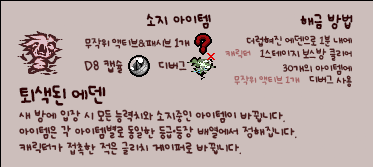
<style>
.page{position:relative;width:373px;height:167px;background:#ccbebb}
.page>*{position:absolute;margin:0}
.t1{font:12px "UhBeeSe_hyunBold";color:#2e0304}
.t2{font:12px "UhBeeSe_hyunBold";letter-spacing:-0.1em;color:#2e0304}
.t3{font:12px "UhBeeSe_hyunBold";letter-spacing:-0.15em;color:#2e0304}
.t4{font:9px "UhBeeSe_hyunBold";letter-spacing:-0.075em;color:#4b1c1c}
.t5{font:9px "UhBeeSe_hyunBold";color:#4b1c1c}
.t6{font:9px "Font_soulsV2_Title-Regular";letter-spacing:-0.075em;color:#4b1c1c}
.t7{font:10px "Font_soulsV2_Title-Regular";letter-spacing:-0.075em;color:#4b1c1c}
.t8{font:9px/13px "UhBeeSe_hyunBold";letter-spacing:-0.05em;color:#4b1c1c}
.t9{font:8px/13px "UhBeeSe_hyunBold";letter-spacing:-0.05em;color:#a66565}
.t10{font:8px/13px "UhBeeSe_hyunBold";color:#a66565}
.t11{font:9px/15px "UhBeeSe_hyunBold";letter-spacing:-0.05em;color:#4b1c1c}
.t12{font:9px/11px "UhBeeSe_hyunBold";letter-spacing:-0.05em;color:#4b1c1c}
.t13{font:8px/13px "UhBeeSe_hyunBold";letter-spacing:0.025em;color:#a66565}
.t14{font:10px "UhBeeSe_hyunBold";color:#4b1c1c}
.t15{font:10px/16px "UhBeeSe_hyunBold";letter-spacing:-0.025em;color:#4b1c1c}
.t16{font:15.2px/24px "UhBeeSe_hyunBold";letter-spacing:-0.1em;color:#2e0304;scale:1.05 1}
.t17{font:16px/24px "UhBeeSe_hyunBold";letter-spacing:-0.05em;color:#2e0304}
.t18{font:16px/24px "UhBeeSe_hyunBold";letter-spacing:-0.025em;color:#2e0304}
.t19{font:10px/16px "UhBeeSe_hyun";letter-spacing:-0.025em;color:#4b1c1c}
</style>
<div class="page">
<p class="t1" style="left:146px;top:13px;width:65px;height:16px"><span class="t2">소</span>지 아이템</p>
<p class="t1" style="left:300px;top:13px;width:53px;height:17px">해금 방<span class="t3">법</span></p>
<p class="t4" style="left:85px;top:38px;width:105px;height:11px">무작위 <span class="t5">액</span>티브<span class="t6">&amp;</span><span class="t5">패</span>시브 <span class="t7">1</span>개</p>
<p class="t8" style="left:225px;top:35px;width:127px;height:53px;text-align:right">더럽혀진 에덴으로 1분 내에<br> <span class="t9">캐</span><span class="t10">릭</span><span class="t9">터   </span><span class="t11">1스테이지 보스방 클리어<br></span><span class="t12">30개의 아이템에<br> </span><span class="t9">무작위 </span><span class="t13">액</span><span class="t9">티브 1개</span>   디버그 사용</p>
<p class="t14" style="left:84px;top:60px;width:39px;height:14px">D8 캡슐</p>
<p class="t14" style="left:158px;top:61px;width:29px;height:10px">디버그</p>
<p class="t15" style="left:19px;top:85px;width:278px;height:71px"><span class="t16">토</span><span class="t17">ㅣ</span><span class="t18">색</span><span class="t17">된 에덴<br></span>새 방에 입장 시 모든 능력치와 소지중인 아이템이 바뀝니다.<br>아이템은 각 아이템별로 동일한 등<span class="t19">급</span>·등장 배열에서 정해집니다.<br>캐릭터가 접촉한 적은 글리치 게이퍼로 바뀝니다.</p>
</div>
